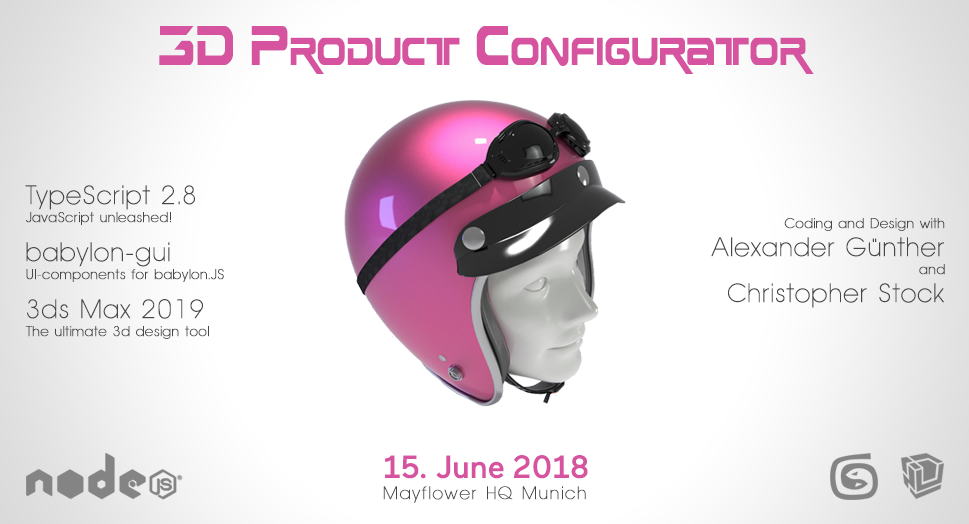
<style>
.page{position:relative;width:969px;height:524px;background:#ffffff}
.page>*{position:absolute;margin:0}
.t1{font:56px "EarthNormal";color:#d653a0;font-variant:small-caps;scale:0.71 1}
.t2{font:14px/18px "AvantageSmallNormal";letter-spacing:0.02em;color:#474747;font-weight:bold}
.t3{font:26px/39px "AvantageSmallNormal";letter-spacing:0.02em;color:#474747;font-weight:bold}
.t4{font:26px/28px "AvantageSmallNormal";letter-spacing:0.02em;color:#474747;font-weight:bold}
.t5{font:17.7px/21px "AvantageSmallNormal";letter-spacing:0.08em;color:#474747;font-weight:bold}
.t6{font:32.2px/82px "Maax-Medium";letter-spacing:-0.01em;color:#d653a0}
</style>
<div class="page">
<p class="t1" style="left:159px;top:26px;width:655px;height:48px">3D Product Configurator</p>
<p class="t2" style="left:25px;top:185px;width:199px;height:154px"><span class="t3">TypeScript 2.8<br></span>JavaScript unleashed!<br><span class="t3">babylon-gui<br></span>UI-components for babylon.JS<br><span class="t3">3ds Max 2019<br></span>The ultimate 3d design tool</p>
<p class="t2" style="left:711px;top:218px;width:234px;height:90px;text-align:right">Coding and Design with<br><span class="t4">Alexander Günther<br></span>and<br><span class="t4">Christopher Stock</span></p>
<p class="t5" style="left:383px;top:455px;width:205px;height:48px"><span class="t6">15. June 2018<br></span>Mayflower HQ Munich</p>
</div>
